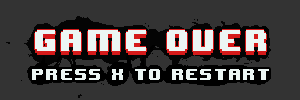
<style>
.page{position:relative;width:300px;height:100px;background:#333333}
.page>*{position:absolute;margin:0}
.t1{font:24.7px "8BITWONDERNominal";letter-spacing:0.1em;color:#ecf6f4}
.t2{font:13.7px "8BITWONDERNominal";letter-spacing:0.1em;color:#ecf6f4}
</style>
<div class="page">
<p class="t1" style="left:35px;top:30px;width:231px;height:21px">GAME OVER</p>
<p class="t2" style="left:32px;top:69px;width:237px;height:11px">PRESS X TO RESTART</p>
</div>
